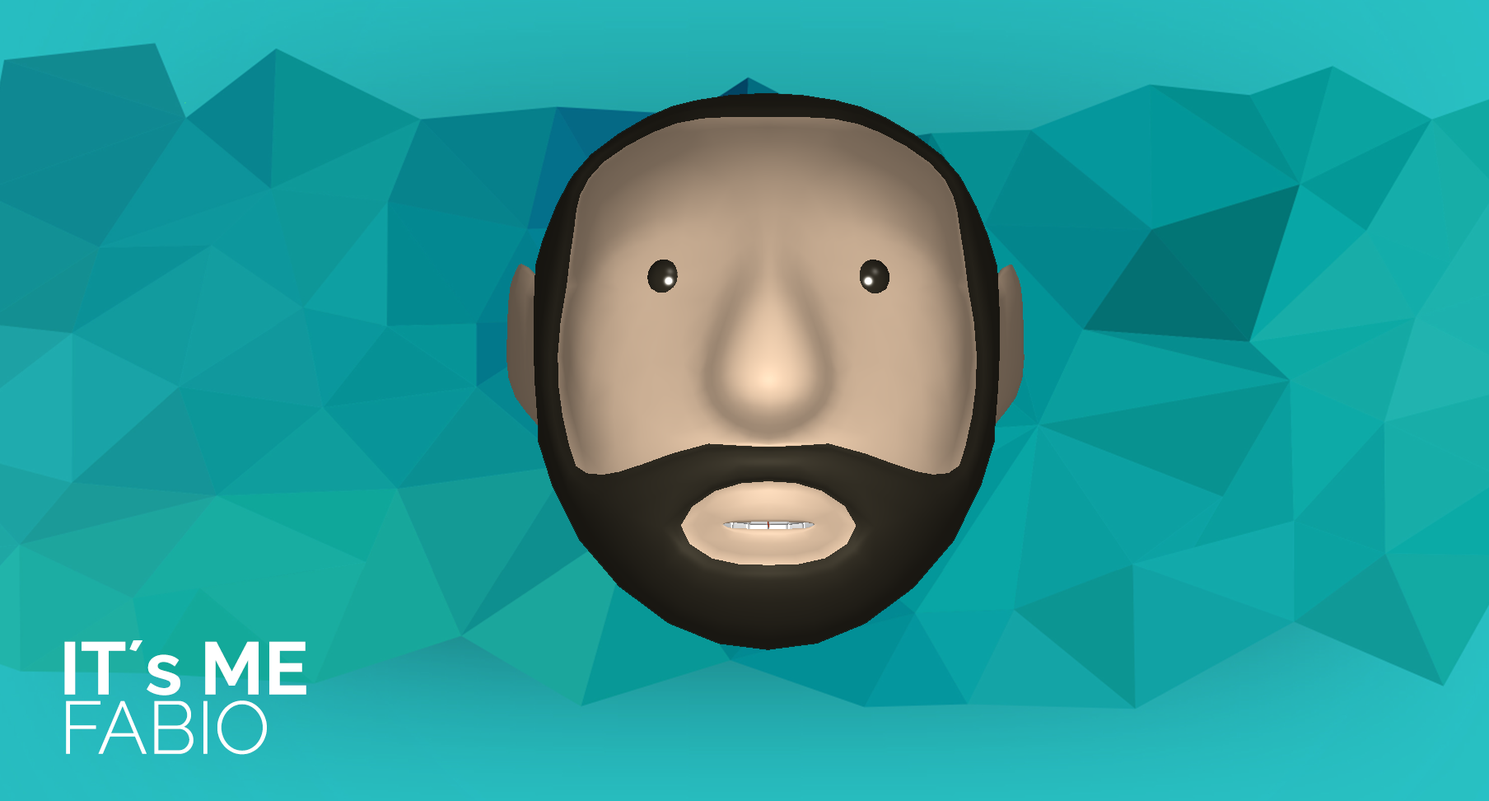
<style>
.page{position:relative;width:1489px;height:801px}
.page>*{position:absolute;margin:0}
.t1{font:74.1px/59.3px "Raleway-Light";color:#ffffff;text-transform:uppercase}
.t2{font:74.1px/59.3px "Raleway-Bold";color:#ffffff;text-transform:uppercase}
.t3{font:74.1px/59.3px "Raleway-Bold";color:#ffffff}
</style>
<div class="page">
<p class="t1" style="left:64px;top:640px;width:242px;height:115px"><span class="t2">It´</span><span class="t3">s</span><span class="t2"> me<br></span>Fabio</p>
</div>
